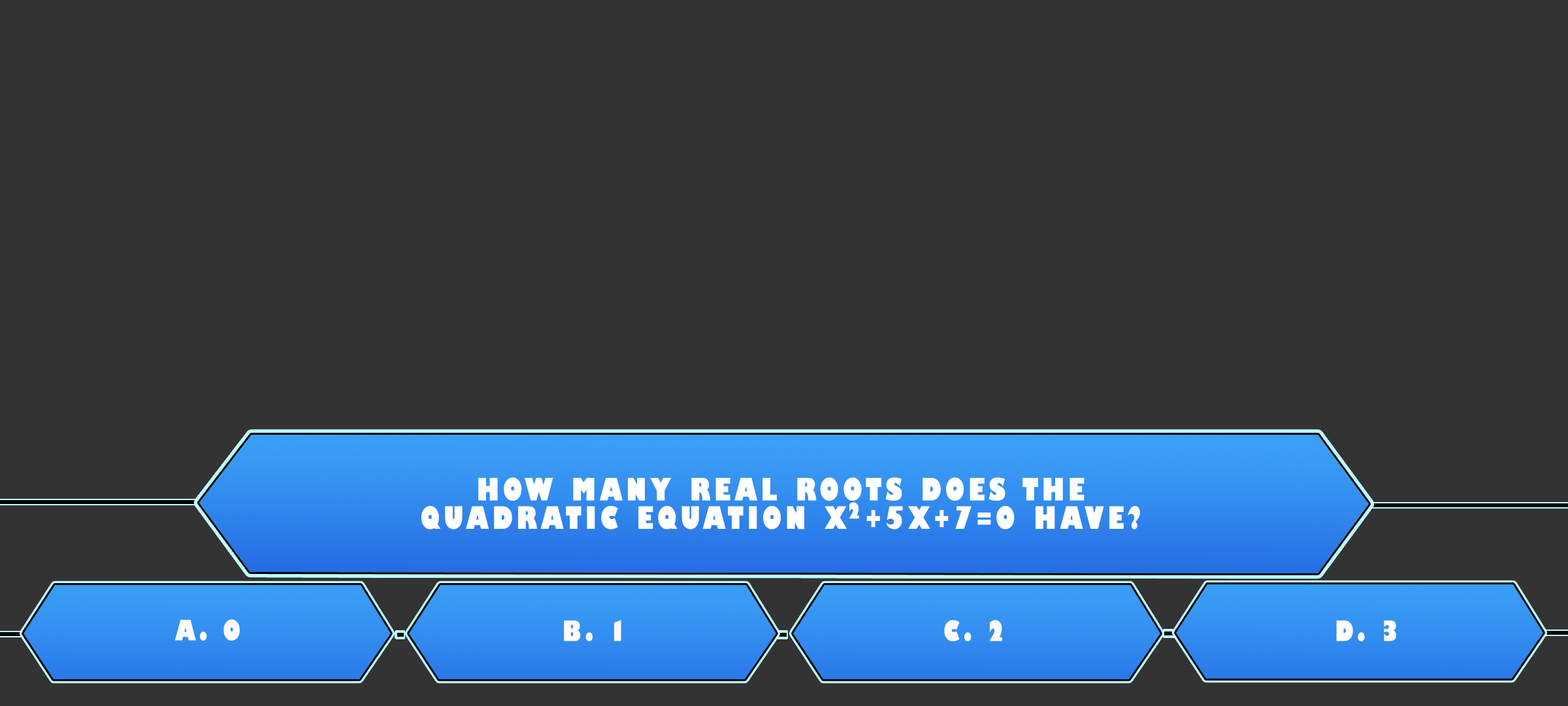
<style>
.page{position:relative;width:1568px;height:706px;background:#333333}
.page>*{position:absolute;margin:0}
.t1{font:30px/28.4px "GillSans-UltraBoldCondensed";letter-spacing:0.115em;color:#ffffff;text-transform:uppercase;scale:1.12 1}
.t2{font:21.1px "GillSans-UltraBoldCondensed";letter-spacing:0.115em;color:#ffffff;text-transform:uppercase;scale:1.11 1}
.t3{font:27.2px "GillSans-UltraBoldCondensed";letter-spacing:0.115em;color:#fdfdfd;text-transform:uppercase;scale:1.12 1}
.t4{font:27.2px "GillSans-UltraBoldCondensed";letter-spacing:0.115em;color:#fcf9f9;text-transform:uppercase;scale:1.12 1}
.t5{font:27.2px "GillSans-UltraBoldCondensed";letter-spacing:0.115em;color:#fdfcfc;text-transform:uppercase;scale:1.12 1}
.t6{font:27.2px "GillSans-UltraBoldCondensed";letter-spacing:0.115em;color:#fffdfd;text-transform:uppercase;scale:1.12 1}
</style>
<div class="page">
<p class="t1" style="left:421px;top:477px;width:719px;height:52px;text-align:center">How many real roots does the<br>quadratic equation x +5x+7=0 have?</p>
<p class="t2" style="left:849px;top:502px;width:10px;height:17px">2</p>
<p class="t3" style="left:175px;top:619px;width:65px;height:21px">A. 0</p>
<p class="t4" style="left:564px;top:619px;width:57px;height:22px">B. 1</p>
<p class="t5" style="left:944px;top:619px;width:58px;height:22px">C. 2</p>
<p class="t6" style="left:1336px;top:620px;width:60px;height:21px">D. 3</p>
</div>
